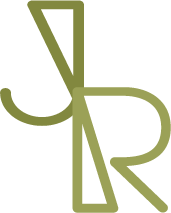
<style>
.page{position:relative;width:171px;height:213px;background:#ffffff}
.page>*{position:absolute;margin:0}
.t1{font:155px "EdgeCaps-Regular";letter-spacing:0.1em;color:#82883f;font-weight:bold;scale:1.09 1}
.t2{font:155px "EdgeCaps-Regular";letter-spacing:0.1em;color:#9ba157;font-weight:bold;scale:1.09 1}
</style>
<div class="page">
<p class="t1" style="left:0px;top:0px;width:84px;height:126px">J</p>
<p class="t2" style="left:72px;top:87px;width:99px;height:126px">RR</p>
</div>
